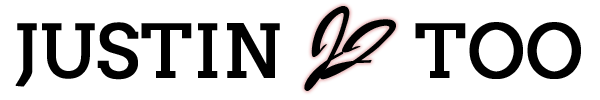
<style>
.page{position:relative;width:600px;height:100px;background:#ffffff}
.page>*{position:absolute;margin:0}
.t1{font:131.8px "BrushScriptMT";color:#000000;font-variant:small-caps}
.t2{font:104px "Arvo";color:#000000;font-variant:small-caps;font-weight:bold}
</style>
<div class="page">
<p class="t1" style="left:304px;top:6px;width:46px;height:85px">j</p>
<p class="t2" style="left:15px;top:22px;width:265px;height:65px">justin</p>
<p class="t1" style="left:319px;top:19px;width:77px;height:61px;rotate:28deg">j</p>
<p class="t2" style="left:415px;top:22px;width:166px;height:57px">too</p>
</div>
